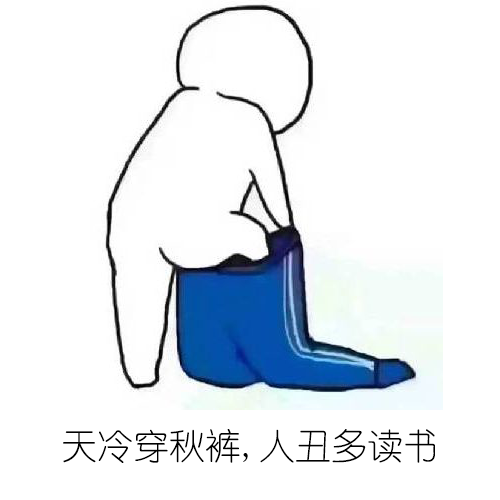
<style>
.page{position:relative;width:500px;height:500px;background:#ffffff}
.page>*{position:absolute;margin:0}
.t1{font:36px "YouYuan";color:#000000}
</style>
<div class="page">
<p class="t1" style="left:63px;top:429px;width:372px;height:34px">天冷穿秋裤,人丑多读书</p>
</div>
